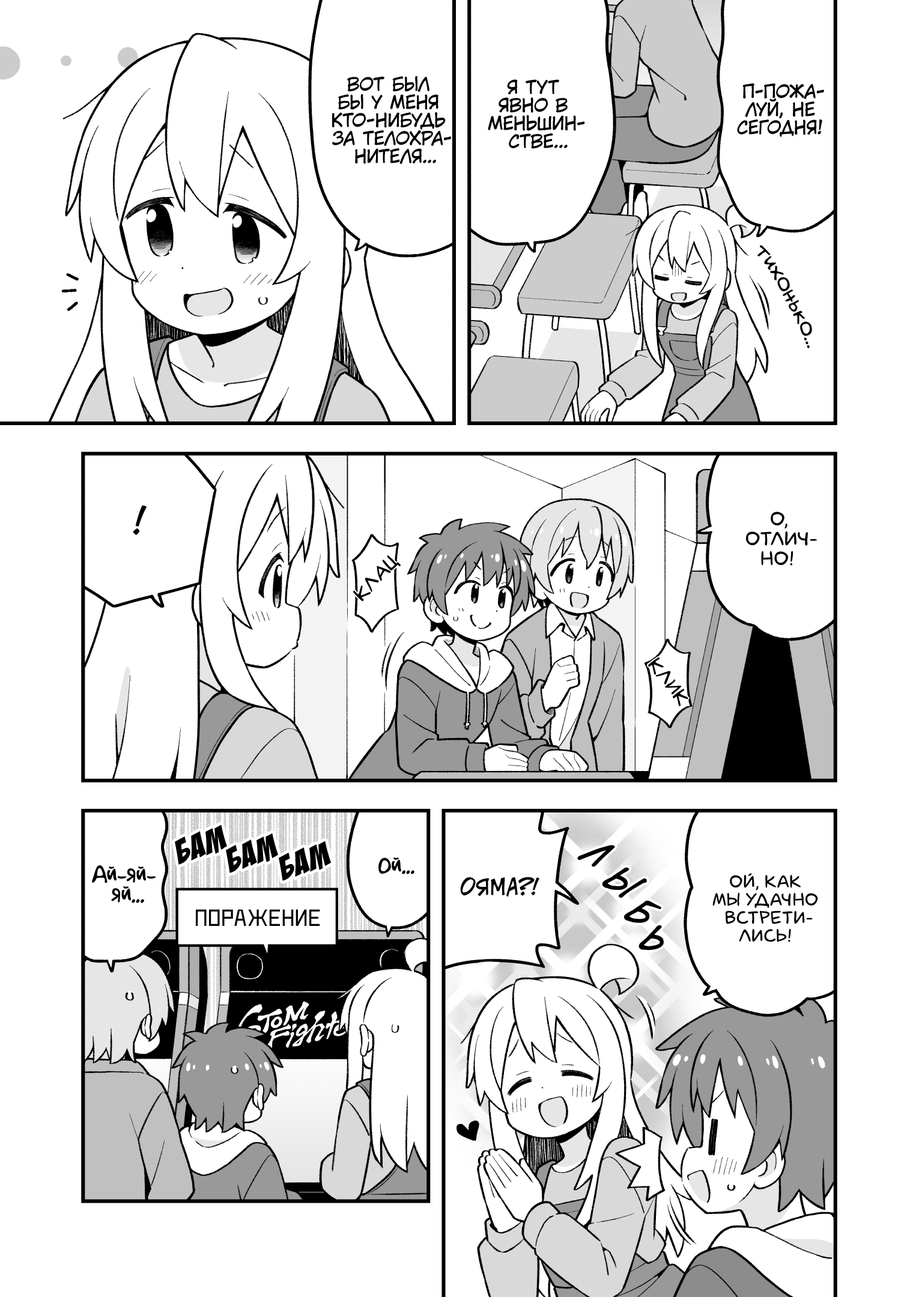
<style>
.page{position:relative;width:919px;height:1297px;background:#ffffff}
.page>*{position:absolute;margin:0}
.t1{font:18px "KuraiVoice2";color:#000000;text-transform:uppercase}
.t2{font:21.6px "v_Augie";color:#000000}
.t3{font:36px "v_CCJeffCampbell";color:#000000;text-transform:uppercase}
.t4{font:19.8px "laCartoonerie";color:#000000;text-transform:uppercase}
.t5{font:18px "v_Augie";color:#000000;text-transform:uppercase;font-weight:bold}
.t6{font:36px "BadaBoom";color:#000000}
.t7{font:36px "v_CCDearDiary";color:#000000;text-transform:uppercase}
.t8{font:19.8px "AkbarPlain";color:#000000}
.t9{font:21.6px "v_CCJeffCampbell";color:#000000;text-transform:uppercase}
.t10{font:18px "laCartoonerie";color:#000000;text-transform:uppercase}
.t11{font:23.4px "DeadMetroC";color:#000000;text-transform:uppercase}
</style>
<div class="page">
<p class="t1" style="left:332px;top:76px;width:119px;height:88px;text-align:center">Вот был<br>бы у меня<br>кто-нибудь<br>за телохра-<br>нителя...</p>
<p class="t1" style="left:488px;top:79px;width:97px;height:70px;text-align:center">Я тут<br>явно в<br>меньшин-<br>стве...</p>
<p class="t1" style="left:737px;top:83px;width:87px;height:54px;text-align:center">П-пожа-<br>луй, не<br>сегодня!</p>
<p class="t2" style="left:757px;top:245px;width:55px;height:103px;rotate:61deg">тихонько...</p>
<p class="t3" style="left:133px;top:505px;width:14px;height:30px">!</p>
<p class="t4" style="left:746px;top:512px;width:71px;height:54px;text-align:center">О,<br>отлич-<br>но!</p>
<p class="t5" style="left:353px;top:556px;width:48px;height:46px;rotate:-46deg">клац</p>
<p class="t5" style="left:648px;top:657px;width:40px;height:49px;rotate:52deg">клик</p>
<p class="t6" style="left:175px;top:825px;width:52px;height:40px;rotate:-19deg">бам</p>
<p class="t6" style="left:226px;top:833px;width:52px;height:40px;rotate:-19deg">бам</p>
<p class="t6" style="left:279px;top:841px;width:52px;height:40px;rotate:-19deg">бам</p>
<p class="t7" style="left:577px;top:845px;width:38px;height:22px;rotate:35deg">л</p>
<p class="t8" style="left:378px;top:858px;width:36px;height:17px">Ой...</p>
<p class="t8" style="left:92px;top:866px;width:64px;height:37px;text-align:center">Ай-яй-<br>яй...</p>
<p class="t7" style="left:602px;top:867px;width:45px;height:31px;rotate:36deg">ы</p>
<p class="t9" style="left:460px;top:877px;width:79px;height:20px">Ояма?!</p>
<p class="t10" style="left:712px;top:873px;width:106px;height:69px;text-align:center">Ой, как<br>мы удачно<br>встрети-<br>лись!</p>
<p class="t7" style="left:624px;top:900px;width:37px;height:23px;rotate:35deg">б</p>
<p class="t11" style="left:196px;top:909px;width:124px;height:17px">Поражение</p>
<p class="t7" style="left:639px;top:926px;width:25px;height:25px;rotate:23deg">ь</p>
</div>
